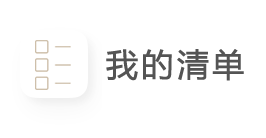
<style>
.page{position:relative;width:266px;height:138px;background:#ffffff}
.page>*{position:absolute;margin:0}
.t1{font:32px "MicrosoftYaHei";letter-spacing:0.08em;color:#545454;font-weight:bold}
</style>
<div class="page">
<p class="t1" style="left:106px;top:49px;width:138px;height:32px">我的清单</p>
</div>
